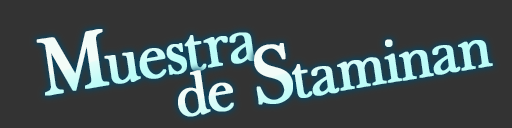
<style>
.page{position:relative;width:512px;height:128px;background:#333333}
.page>*{position:absolute;margin:0}
.t1{font:72.8px "BaskervilleLight";letter-spacing:-0.06em;font-weight:bold;scale:0.93 1}
.t2{font:95.4px "BaskervilleLight";letter-spacing:-0.06em;font-weight:bold;scale:0.93 1}
.t3{font:68.8px "BaskervilleLight";letter-spacing:-0.06em;color:#c9fcf8;font-weight:bold;scale:0.93 1}
.t4{font:95.4px "BaskervilleLight";letter-spacing:-0.06em;color:#c9fcf8;font-weight:bold;scale:0.93 1}
</style>
<div class="page">
<p class="t1" style="left:36px;top:29px;width:223px;height:67px;rotate:-10deg"><span class="t2">M</span>uestra</p>
<p class="t3" style="left:178px;top:39px;width:315px;height:78px;rotate:-10deg">de <span class="t4">S</span>taminan</p>
</div>
